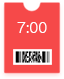
<style>
.page{position:relative;width:64px;height:79px;background:#f64949}
.page>*{position:absolute;margin:0}
.t1{font:18px "OriyaSangamMN";color:#ffffff}
</style>
<div class="page">
<p class="t1" style="left:17px;top:22px;width:30px;height:11px">7:00</p>
</div>
